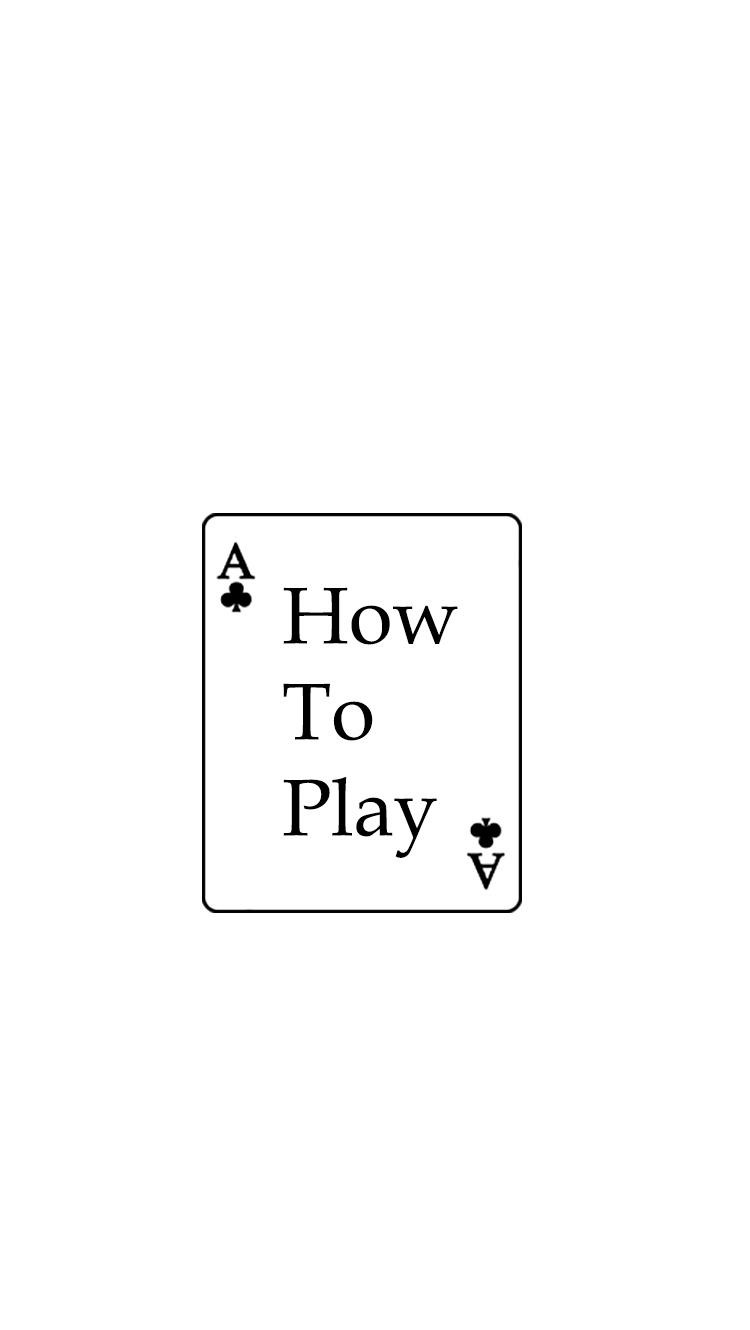
<style>
.page{position:relative;width:750px;height:1330px;background:#ffffff}
.page>*{position:absolute;margin:0}
.t1{font:80px "BookAntiqua";color:#000000}
</style>
<div class="page">
<p class="t1" style="left:283px;top:587px;width:175px;height:271px">How To Play</p>
</div>
